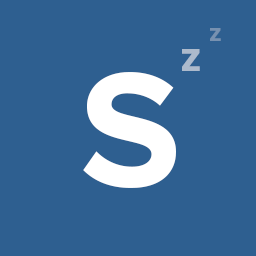
<style>
.page{position:relative;width:256px;height:256px;background:#2e5f90}
.page>*{position:absolute;margin:0}
.t1{font:25.9px "ProximaNova-Bold";color:#7791b0;scale:1.03 1}
.t2{font:43.7px "ProximaNova-Bold";color:#acbacc}
.t3{font:169.4px "ProximaNova-Bold";color:#ffffff}
</style>
<div class="page">
<p class="t1" style="left:210px;top:28px;width:11px;height:13px">z</p>
<p class="t2" style="left:182px;top:49px;width:18px;height:22px">z</p>
<p class="t3" style="left:83px;top:72px;width:93px;height:116px">S</p>
</div>
